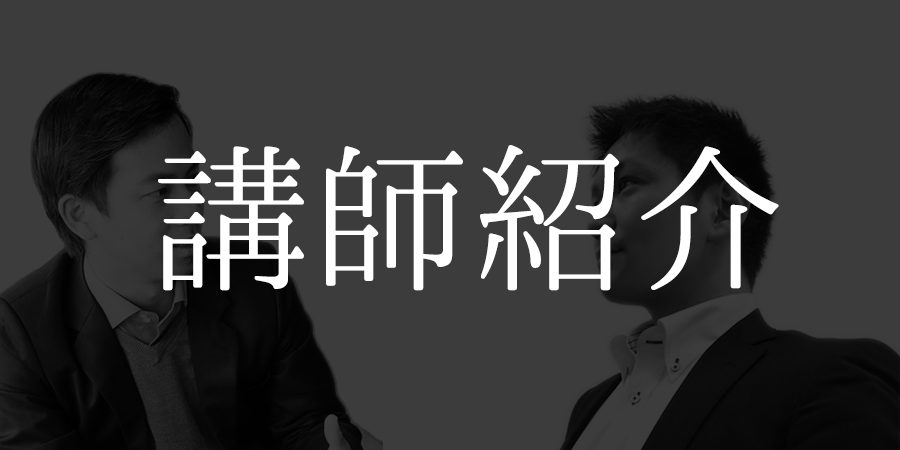
<style>
.page{position:relative;width:900px;height:450px;background:#3c3c3c}
.page>*{position:absolute;margin:0}
.t1{font:160px "02UtsukushiMincho";color:#ffffff}
</style>
<div class="page">
<p class="t1" style="left:158px;top:145px;width:621px;height:146px">講師紹介</p>
</div>
